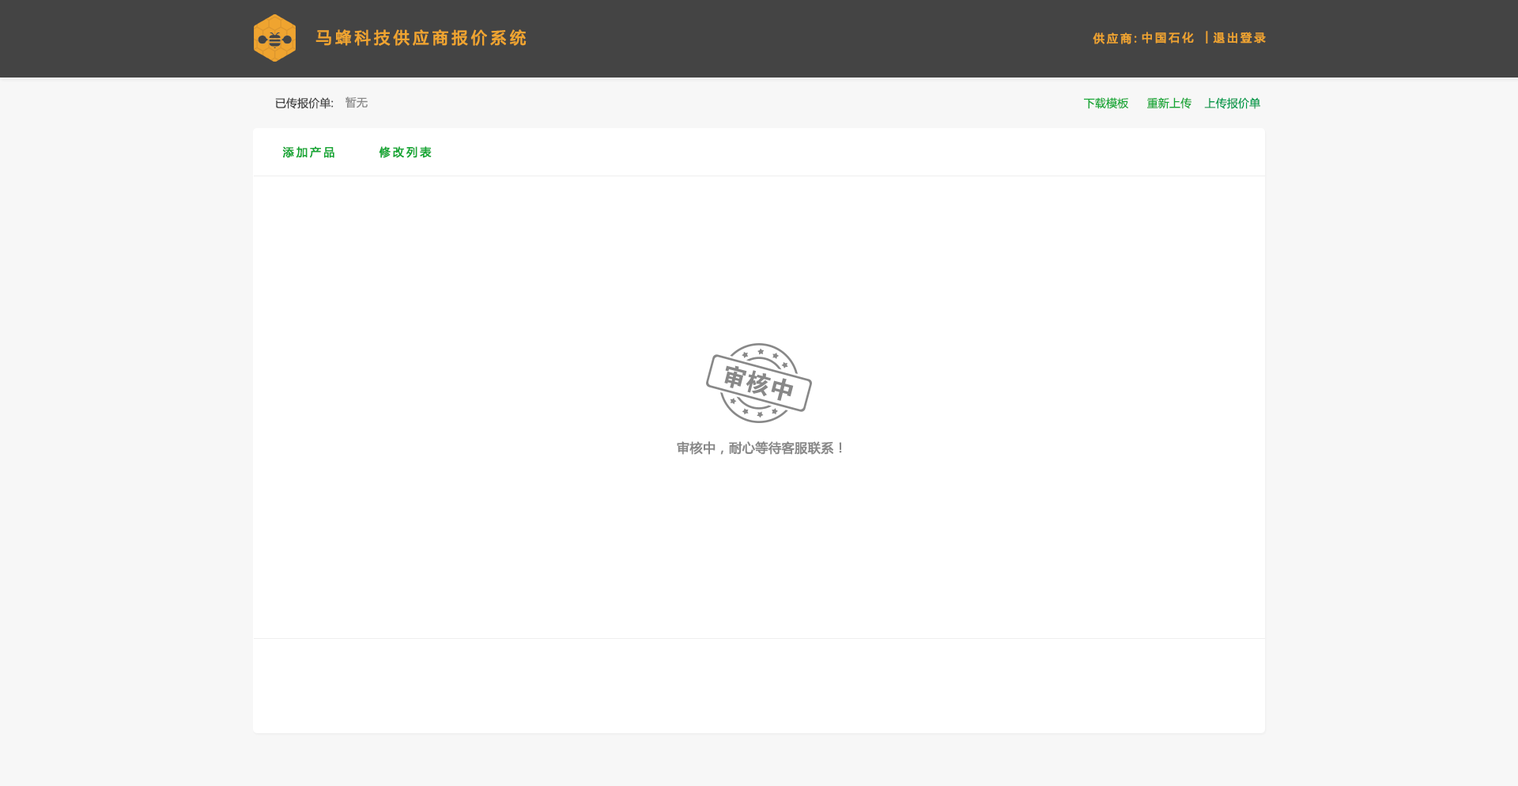
<style>
.page{position:relative;width:1518px;height:786px;background:#ffffff}
.page>*{position:absolute;margin:0}
.t1{font:15.8px "MicrosoftYaHei";letter-spacing:0.2em;color:#efa430;font-weight:bold}
.t2{font:11.1px "MicrosoftYaHei";letter-spacing:0.2em;color:#efa430;font-weight:bold}
.t3{font:11.1px "MicrosoftYaHei";letter-spacing:0.01em;color:#444444}
.t4{font:11.1px "MicrosoftYaHei";letter-spacing:0.01em;color:#888888}
.t5{font:11.1px "MicrosoftYaHei";letter-spacing:0.01em;color:#16a735}
.t6{font:11.1px "MicrosoftYaHei";letter-spacing:0.01em;color:#009b4c}
.t7{font:11.1px "MicrosoftYaHei";letter-spacing:0.2em;color:#16a735;font-weight:bold}
.t8{font:12.6px "MicrosoftYaHei";letter-spacing:0.01em;color:#888888;font-weight:bold}
</style>
<div class="page">
<p class="t1" style="left:315px;top:29px;width:211px;height:17px">马蜂科技供应商报价系统</p>
<p class="t2" style="left:1092px;top:32px;width:45px;height:12px">供应商:</p>
<p class="t2" style="left:1141px;top:32px;width:53px;height:11px">中国石化</p>
<p class="t2" style="left:1205px;top:31px;width:3px;height:12px">|</p>
<p class="t2" style="left:1213px;top:32px;width:53px;height:11px">退出登录</p>
<p class="t3" style="left:275px;top:97px;width:59px;height:12px">已传报价单:</p>
<p class="t4" style="left:345px;top:96px;width:23px;height:12px">暂无</p>
<p class="t5" style="left:1084px;top:97px;width:45px;height:12px">下载模板</p>
<p class="t5" style="left:1147px;top:97px;width:44px;height:12px">重新上传</p>
<p class="t6" style="left:1204px;top:97px;width:56px;height:12px">上传报价单</p>
<p class="t7" style="left:282px;top:146px;width:52px;height:12px">添加产品</p>
<p class="t7" style="left:379px;top:146px;width:53px;height:12px">修改列表</p>
<p class="t8" style="left:677px;top:441px;width:165px;height:14px">审核中，耐心等待客服联系！</p>
</div>
